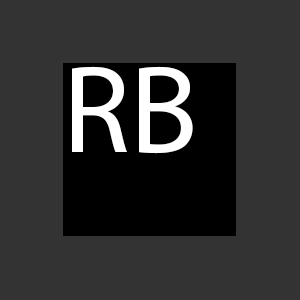
<style>
.page{position:relative;width:300px;height:300px;background:#333333}
.page>*{position:absolute;margin:0}
.t1{font:125px "MyriadPro-Regular";color:#ffffff}
</style>
<div class="page">
<p class="t1" style="left:72px;top:66px;width:121px;height:88px">RB</p>
</div>
